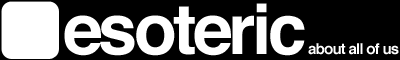
<style>
.page{position:relative;width:400px;height:60px;background:#000000}
.page>*{position:absolute;margin:0}
.t1{font:70px "Helvetica-Bold";letter-spacing:-0.05em;color:#ffffff}
.t2{font:15px "Helvetica-Bold";letter-spacing:-0.05em;color:#ffffff}
</style>
<div class="page">
<p class="t1" style="left:64px;top:3px;width:241px;height:53px">esoteric</p>
<p class="t2" style="left:308px;top:43px;width:91px;height:12px">about all of us</p>
</div>
